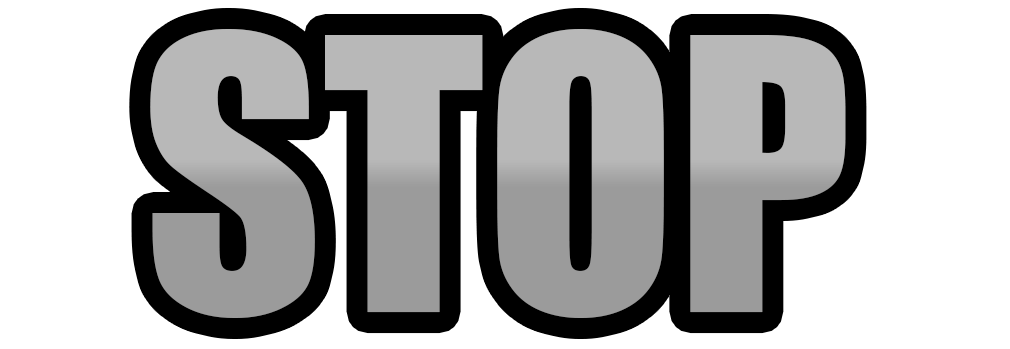
<style>
.page{position:relative;width:1010px;height:349px;background:#ffffff}
.page>*{position:absolute;margin:0}
.t1{font:350px "Impact"}
</style>
<div class="page">
<p class="t1" style="left:150px;top:29px;width:696px;height:289px">STOP</p>
</div>
